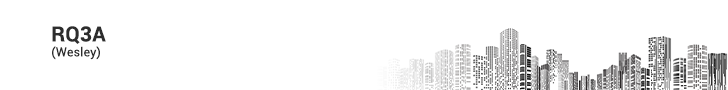
<style>
.page{position:relative;width:728px;height:90px;background:#ffffff}
.page>*{position:absolute;margin:0}
.t1{font:12.5px "Roboto-Regular";letter-spacing:0.01em;color:#2d2d2d}
.t2{font:20.8px "Roboto-Bold";letter-spacing:0.01em;color:#2d2d2d}
</style>
<div class="page">
<p class="t1" style="left:52px;top:26px;width:54px;height:34px"><span class="t2">RQ3A<br></span>(Wesley)</p>
</div>
